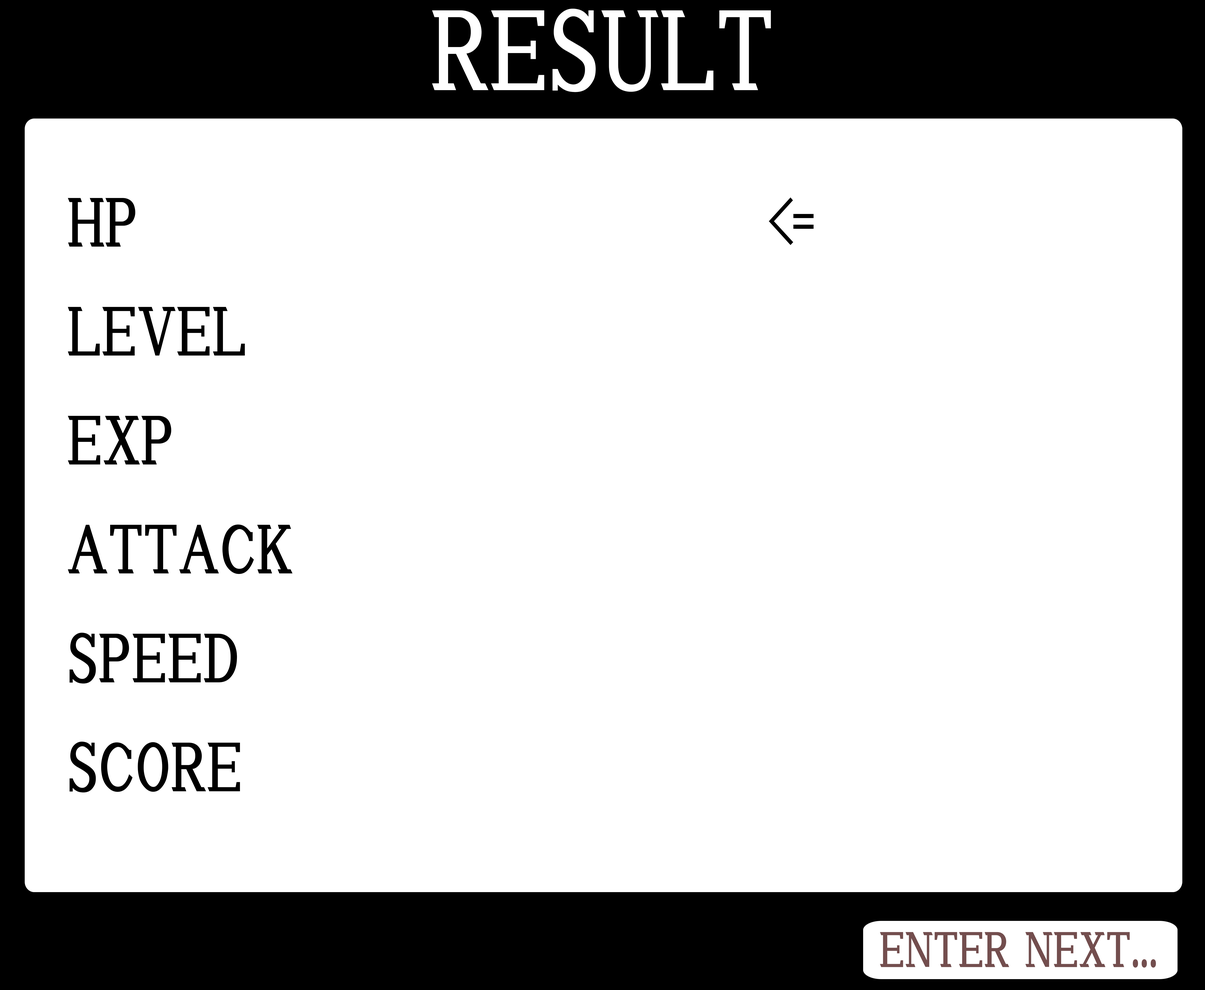
<style>
.page{position:relative;width:1205px;height:990px;background:#ffffff}
.page>*{position:absolute;margin:0}
.t1{font:102.1px "HGSSoeiPresenceEB";color:#ffffff}
.t2{font:62.2px "HGSSoeiPresenceEB";color:#000000}
.t3{font:62.2px "HGSSoeiPresenceEB";letter-spacing:-0.2em;color:#000000}
.t4{font:44.6px "HGSSoeiPresenceEB";color:#734e4e}
</style>
<div class="page">
<p class="t1" style="left:432px;top:8px;width:339px;height:84px">RESULT</p>
<p class="t2" style="left:68px;top:198px;width:225px;height:595px">HP<br>LEVEL <br>EXP<br>ATTACK<br>SPEED<br>SCORE</p>
<p class="t3" style="left:768px;top:197px;width:45px;height:48px">&lt;=</p>
<p class="t4" style="left:880px;top:932px;width:275px;height:36px">ENTER NEXT...</p>
</div>
